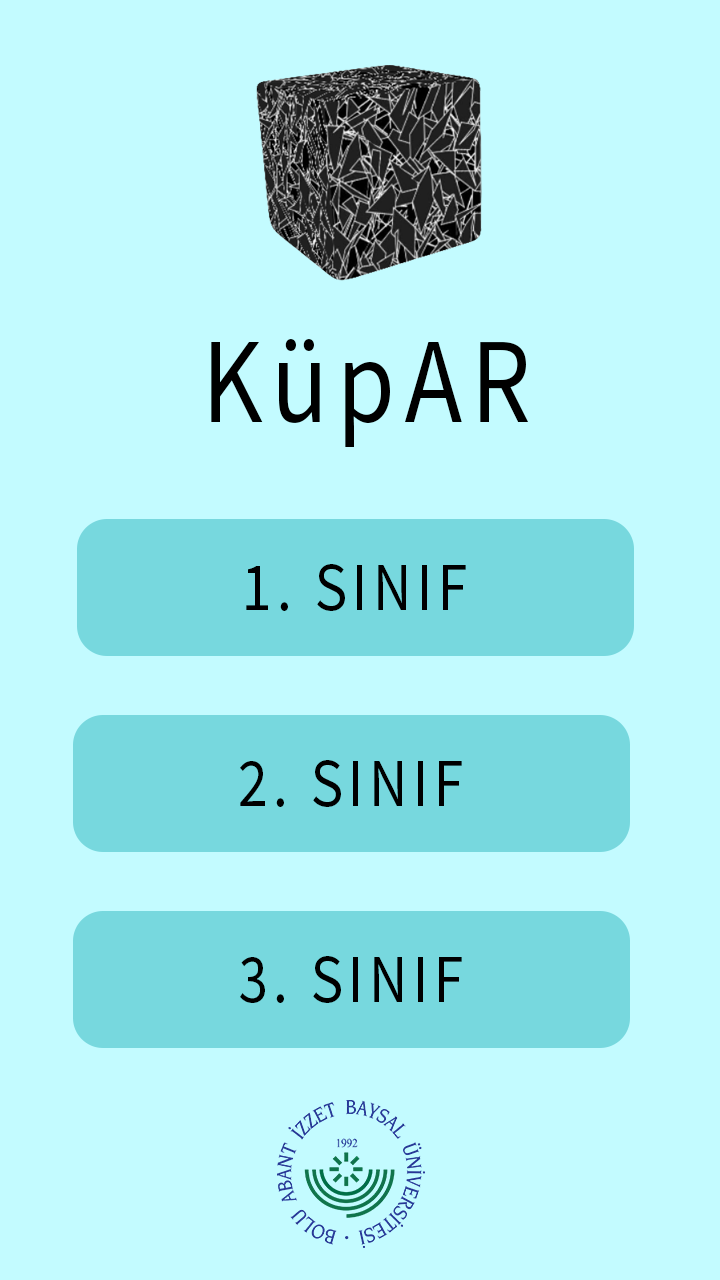
<style>
.page{position:relative;width:720px;height:1280px;background:#c3fbff}
.page>*{position:absolute;margin:0}
.t1{font:121.3px "SourceSansPro-Regular";letter-spacing:0.089em;color:#000000;scale:0.87 1}
.t2{font:69px "SourceSansPro-Regular";letter-spacing:0.089em;color:#000000;scale:0.87 1}
</style>
<div class="page">
<p class="t1" style="left:211px;top:339px;width:318px;height:108px">KüpAR</p>
<p class="t2" style="left:246px;top:564px;width:220px;height:47px">1. SINIF</p>
<p class="t2" style="left:240px;top:760px;width:222px;height:47px">2. SINIF</p>
<p class="t2" style="left:240px;top:956px;width:222px;height:47px">3. SINIF</p>
</div>
